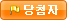
<style>
.page{position:relative;width:67px;height:20px}
.page>*{position:absolute;margin:0}
.t1{font:11px "Dotum";color:#ffffff;font-weight:bold}
</style>
<div class="page">
<p class="t1" style="left:24px;top:5px;width:34px;height:10px">당첨자</p>
</div>
